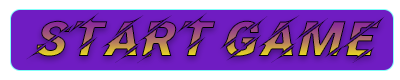
<style>
.page{position:relative;width:400px;height:80px;background:#ffffff}
.page>*{position:absolute;margin:0}
.t1{font:48.5px "Facon"}
</style>
<div class="page">
<p class="t1" style="left:26px;top:12px;width:359px;height:52px">Start Game</p>
</div>
